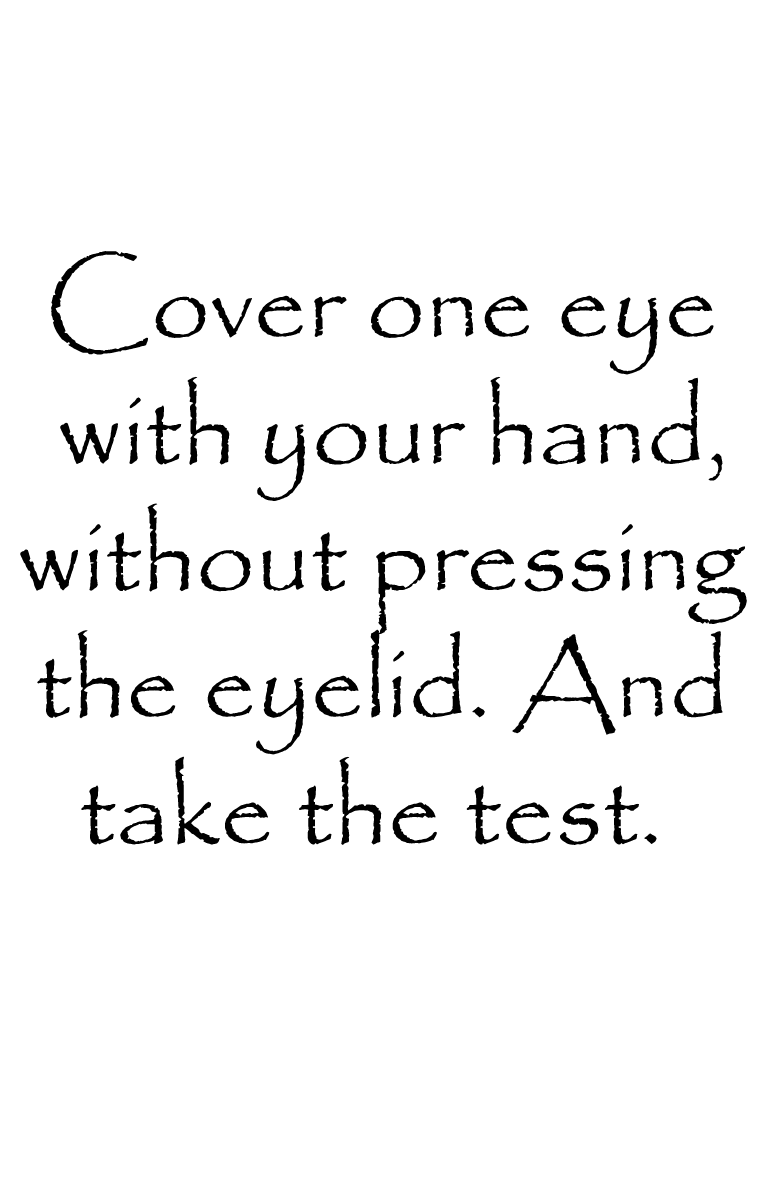
<style>
.page{position:relative;width:768px;height:1200px;background:#ffffff}
.page>*{position:absolute;margin:0}
.t1{font:105.6px "Papyrus-Regular";color:#000000}
</style>
<div class="page">
<p class="t1" style="left:20px;top:251px;width:727px;height:594px;text-align:center">Cover one eye <br>with your hand,<br>without pressing <br>the eyelid. And <br>take the test.</p>
</div>
